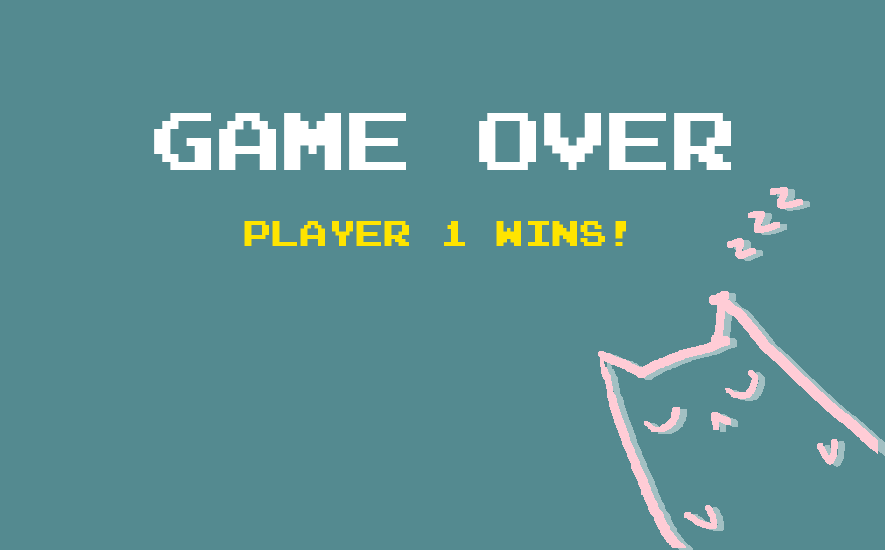
<style>
.page{position:relative;width:885px;height:550px;background:#548a90}
.page>*{position:absolute;margin:0}
.t1{font:65px "Emulogic";color:#ffffff}
.t2{font:28px "Emulogic";color:#ffe400}
</style>
<div class="page">
<p class="t1" style="left:154px;top:113px;width:577px;height:57px">GAME OVER</p>
<p class="t2" style="left:244px;top:221px;width:382px;height:25px">Player 1 wins!</p>
</div>
